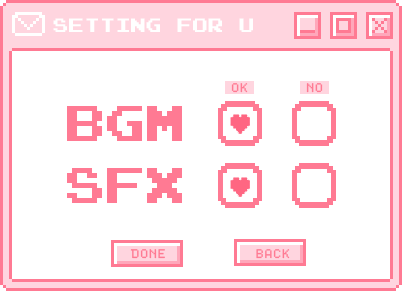
<style>
.page{position:relative;width:402px;height:291px;background:#ffffff}
.page>*{position:absolute;margin:0}
.t1{font:15.5px "PressStart2P";color:#ffffff}
.t2{font:10px "Dogica_Pixel";color:#ff7a93}
.t3{font:40px "PressStart2P";color:#ff7a93}
</style>
<div class="page">
<p class="t1" style="left:53px;top:18px;width:200px;height:14px">SETTING FOR U</p>
<p class="t2" style="left:231px;top:83px;width:17px;height:10px">OK</p>
<p class="t2" style="left:306px;top:83px;width:17px;height:10px">NO</p>
<p class="t3" style="left:67px;top:106px;width:115px;height:35px">BGM</p>
<p class="t3" style="left:67px;top:168px;width:115px;height:35px">SFX</p>
<p class="t2" style="left:130px;top:249px;width:35px;height:10px">DONE</p>
<p class="t2" style="left:256px;top:249px;width:34px;height:10px">BACK</p>
</div>
